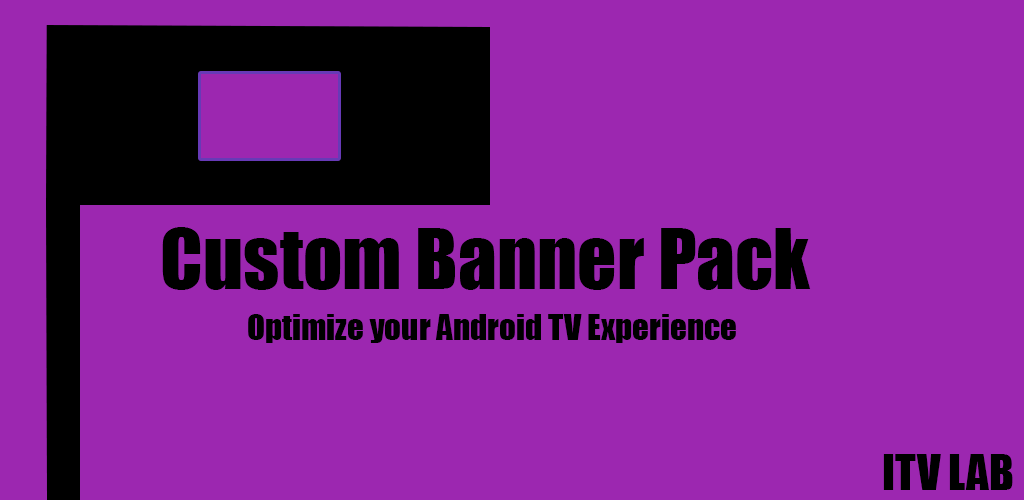
<style>
.page{position:relative;width:1024px;height:500px;background:#9c27b0}
.page>*{position:absolute;margin:0}
.t1{font:77px "Impact";color:#000000}
.t2{font:33px "Impact";color:#000000}
.t3{font:45px "Impact";color:#000000}
</style>
<div class="page">
<p class="t1" style="left:162px;top:227px;width:649px;height:63px">Custom Banner Pack</p>
<p class="t2" style="left:248px;top:314px;width:488px;height:29px">Optimize your Android TV Experience</p>
<p class="t3" style="left:883px;top:454px;width:130px;height:36px">ITV LAB</p>
</div>
